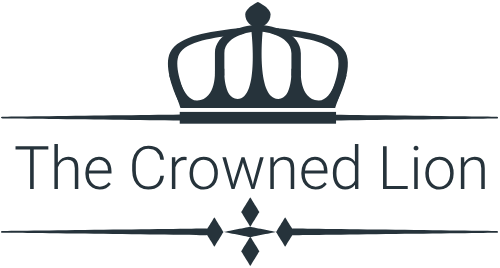
<style>
.page{position:relative;width:500px;height:268px;background:#ffffff}
.page>*{position:absolute;margin:0}
.t1{font:60px "Roboto-Light";color:#26333b}
</style>
<div class="page">
<p class="t1" style="left:15px;top:144px;width:470px;height:46px">The Crowned Lion</p>
</div>
